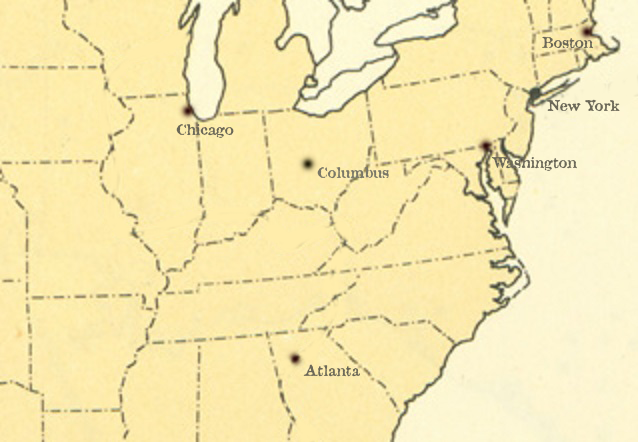
<style>
.page{position:relative;width:638px;height:442px}
.page>*{position:absolute;margin:0}
.t1{font:14.6px "AtticAntique";color:#6b6858}
</style>
<div class="page">
<p class="t1" style="left:542px;top:36px;width:52px;height:13px">Boston</p>
<p class="t1" style="left:176px;top:124px;width:58px;height:14px">Chicago</p>
<p class="t1" style="left:491px;top:157px;width:86px;height:14px">Washington</p>
<p class="t1" style="left:303px;top:364px;width:57px;height:13px">Atlanta</p>
</div>
